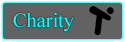
<style>
.page{position:relative;width:125px;height:42px;background:#626262}
.page>*{position:absolute;margin:0}
.t1{font:20.2px "TimesNewRomanPSMT";color:#00ffff}
</style>
<div class="page">
<p class="t1" style="left:13px;top:12px;width:61px;height:20px">Charity</p>
</div>
